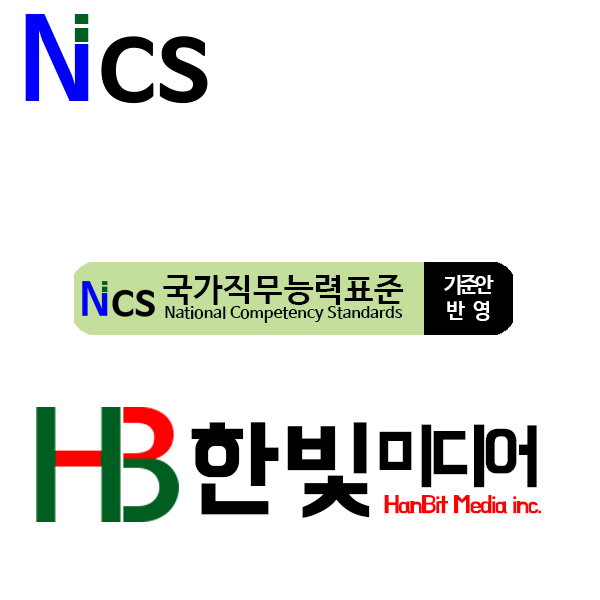
<style>
.page{position:relative;width:600px;height:600px;background:#ffffff}
.page>*{position:absolute;margin:0}
.t1{font:15.7px "NanumBarunGothicBold";letter-spacing:0.02em;color:#000000}
.t2{font:33.1px "NanumBarunGothicBold";letter-spacing:0.02em;color:#000000}
.t3{font:21.5px "NanumBarunGothicBold";letter-spacing:-0.16em;color:#ffffff}
.t4{font:21.5px "NanumBarunGothicBold";letter-spacing:0.34em;color:#ffffff}
.t5{font:24.9px/33.2px "BMHANNAPro";letter-spacing:-0.08em;color:#ff0000}
.t6{font:112.2px "BMHANNAPro";color:#000000}
.t7{font:74.8px "BMHANNAPro";letter-spacing:-0.1em;color:#000000}
</style>
<div class="page">
<p class="t1" style="left:163px;top:275px;width:241px;height:48px;text-align:center"><span class="t2">국가직무능력표준<br></span>National Competency Standards</p>
<p class="t3" style="left:444px;top:275px;width:50px;height:46px;text-align:center">기준안<br><span class="t4">반영</span></p>
<p class="t5" style="left:191px;top:422px;width:350px;height:96px;text-align:right"><span class="t6">한빛</span><span class="t7">미디어<br></span>HanBit Media inc.</p>
</div>
